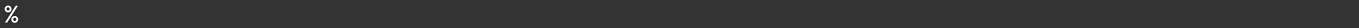
<style>
.page{position:relative;width:1359px;height:28px;background:#333333}
.page>*{position:absolute;margin:0}
.t1{font:24px "Outfit-Regular";color:#ffffff;font-weight:bold;font-style:italic}
</style>
<div class="page">
<p class="t1" style="left:4px;top:5px;width:15px;height:18px">%</p>
</div>
